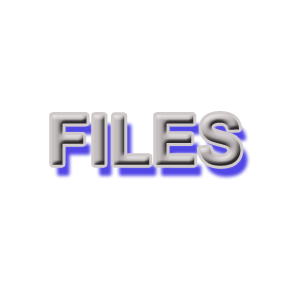
<style>
.page{position:relative;width:300px;height:300px;background:#ffffff}
.page>*{position:absolute;margin:0}
.t1{font:69.3px "Arial-BoldMT"}
</style>
<div class="page">
<p class="t1" style="left:52px;top:114px;width:189px;height:52px">FILES</p>
</div>
